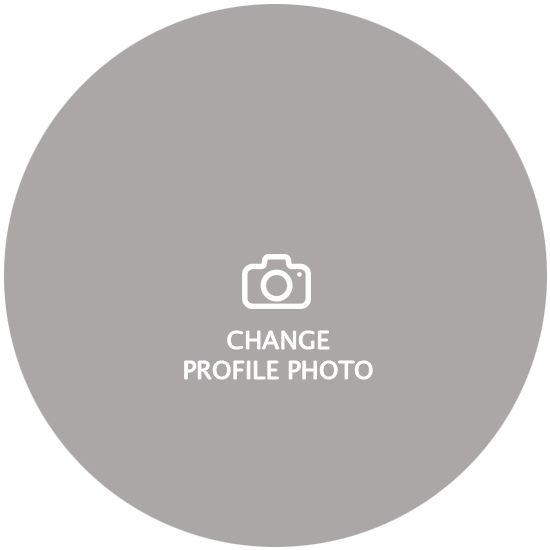
<style>
.page{position:relative;width:550px;height:550px;background:#aba7a7}
.page>*{position:absolute;margin:0}
.t1{font:25px "LucidaSansUnicode";color:#ffffff}
</style>
<div class="page">
<p class="t1" style="left:184px;top:331px;width:189px;height:48px;text-align:center">CHANGE<br>PROFILE PHOTO</p>
</div>
